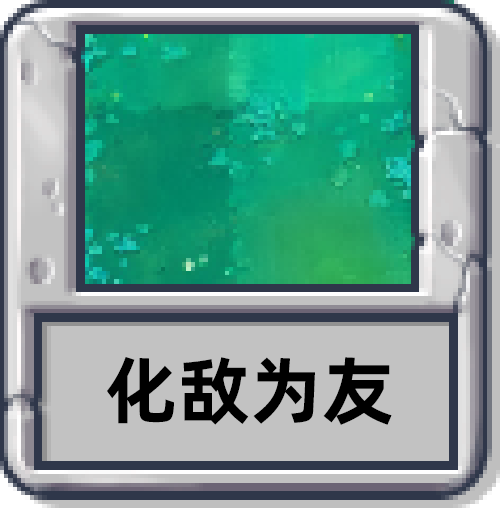
<style>
.page{position:relative;width:500px;height:508px;background:#c2c2c2}
.page>*{position:absolute;margin:0}
.t1{font:73.4px "AlibabaPuHuiTiB";color:#000000}
</style>
<div class="page">
<p class="t1" style="left:107px;top:357px;width:285px;height:68px">化敌为友</p>
</div>
